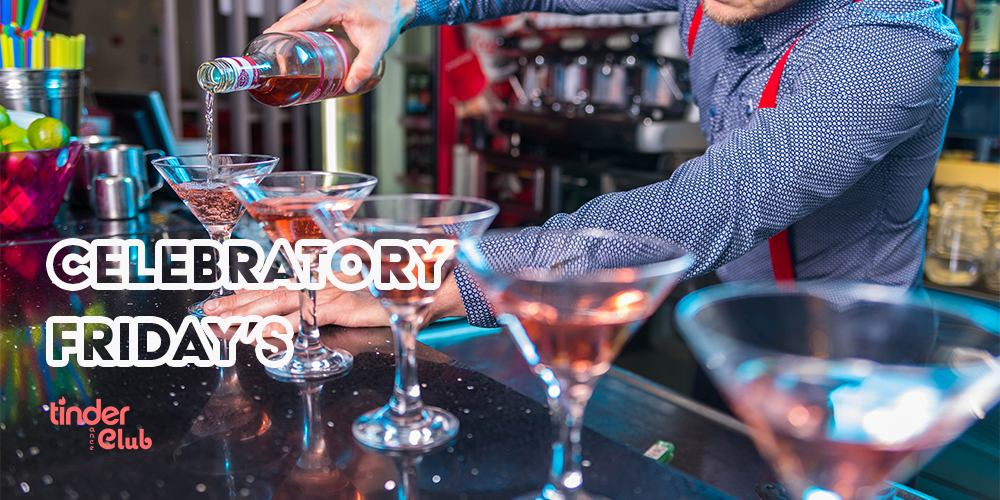
<style>
.page{position:relative;width:1000px;height:500px}
.page>*{position:absolute;margin:0}
.t1{font:61.6px/25.7px "AcierBATText-Solid";letter-spacing:0.05em}
</style>
<div class="page">
<p class="t1" style="left:53px;top:245px;width:394px;height:116px">CELEBRATORY<br><br><br>FRIDAY’S</p>
</div>
